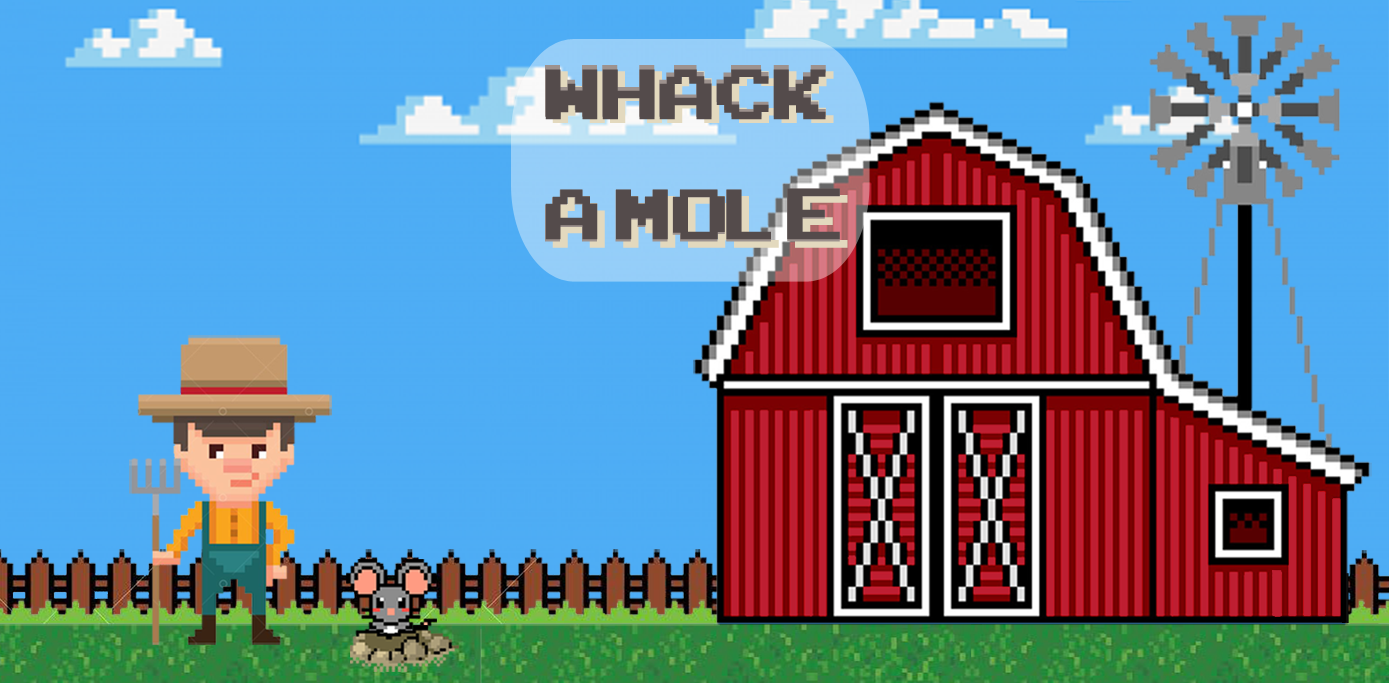
<style>
.page{position:relative;width:1389px;height:683px;background:#4eadf5}
.page>*{position:absolute;margin:0}
.t1{font:100px "ArcadeClassic";color:#544b4b;scale:1.04 1}
</style>
<div class="page">
<p class="t1" style="left:545px;top:69px;width:295px;height:171px">whack<br>a mole</p>
</div>
